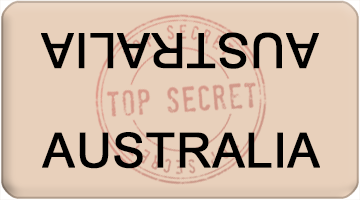
<style>
.page{position:relative;width:360px;height:200px;background:#e8d0bb}
.page>*{position:absolute;margin:0}
.t1{font:48px "ArialMT";color:#000000;font-weight:bold}
</style>
<div class="page">
<p class="t1" style="left:41px;top:32px;width:278px;height:37px;rotate:180deg">AUSTRALIA</p>
<p class="t1" style="left:42px;top:132px;width:278px;height:37px">AUSTRALIA</p>
</div>
